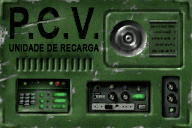
<style>
.page{position:relative;width:192px;height:128px}
.page>*{position:absolute;margin:0}
.t1{font:45.4px "Arial-BoldMT";color:#000000;scale:0.78 1}
.t2{font:9.3px "ArialMT";letter-spacing:0.02em;color:#000000;font-weight:bold;scale:0.79 1}
</style>
<div class="page">
<p class="t1" style="left:9px;top:7px;width:90px;height:32px">P.C.V.</p>
<p class="t2" style="left:9px;top:44px;width:90px;height:8px">UNIDADE DE RECARGA</p>
</div>
